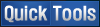
<style>
.page{position:relative;width:100px;height:27px}
.page>*{position:absolute;margin:0}
.t1{font:17px "H2hdrM"}
</style>
<div class="page">
<p class="t1" style="left:4px;top:5px;width:92px;height:18px">Quick Tools</p>
</div>
